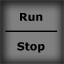
<style>
.page{position:relative;width:64px;height:64px;background:#808080}
.page>*{position:absolute;margin:0}
.t1{font:10.8px "Verdana-Bold";color:#000000}
</style>
<div class="page">
<p class="t1" style="left:20px;top:13px;width:23px;height:8px">Run</p>
<p class="t1" style="left:17px;top:42px;width:28px;height:11px">Stop</p>
</div>
